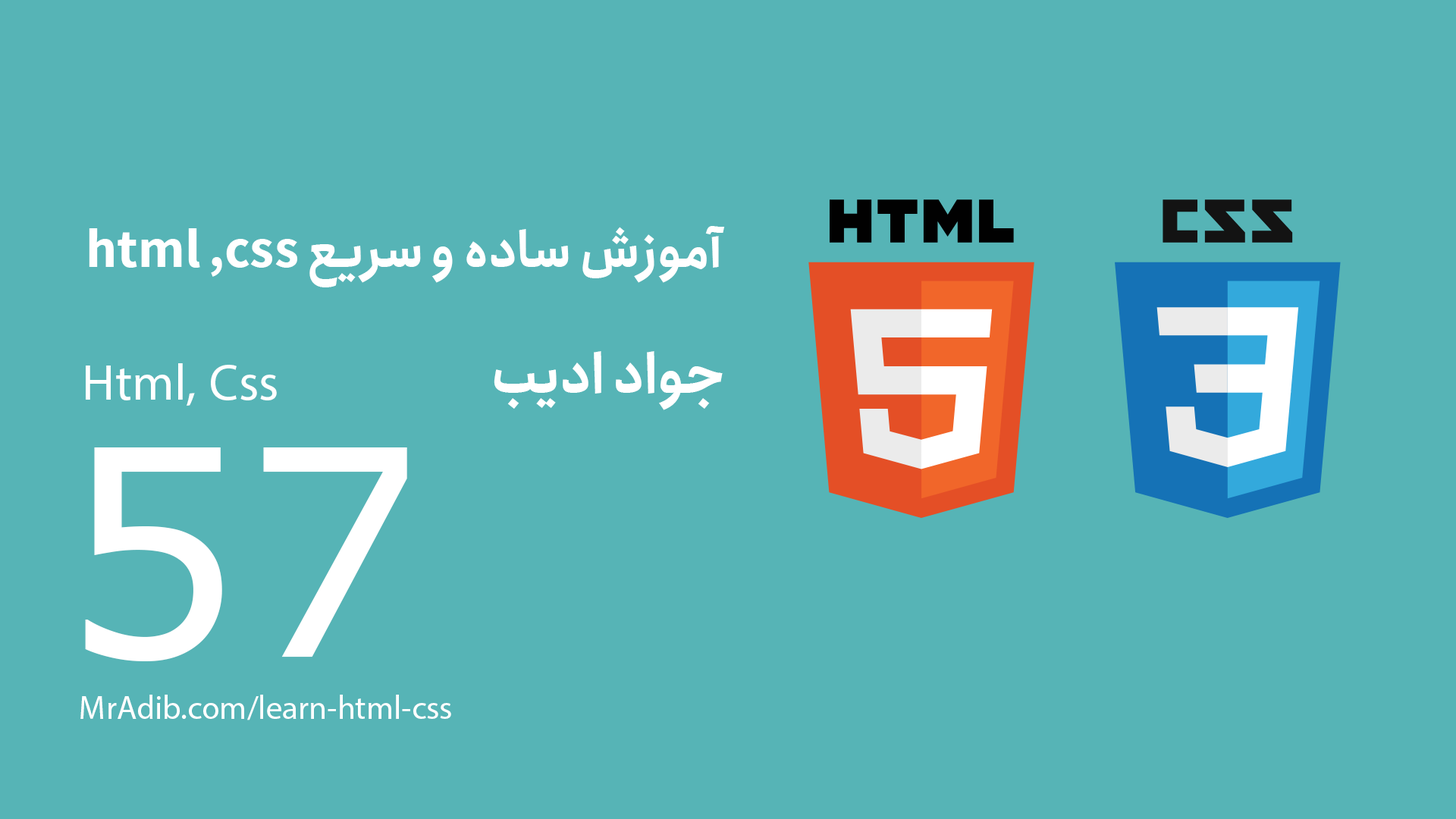
<style>
.page{position:relative;width:1456px;height:819px;background:#56b4b6}
.page>*{position:absolute;margin:0}
.t1{font:49.7px "Anjoman-Bold";color:#ffffff}
.t2{font:54.6px "Anjoman-Bold";color:#ffffff}
.t3{font:70.7px "MyriadArabic-Regular";color:#ffffff}
.t4{font:288.2px "Verdana";color:#ffffff}
.t5{font:45.9px "MyriadArabic-Regular";color:#ffffff}
</style>
<div class="page">
<p class="t1" style="left:89px;top:226px;width:636px;height:61px">html ,css آموزش ساده و سریع</p>
<p class="t2" style="left:494px;top:351px;width:229px;height:59px">جواد ادیب</p>
<p class="t3" style="left:86px;top:363px;width:191px;height:43px">Html, Css</p>
<p class="t4" style="left:85px;top:447px;width:322px;height:214px">57</p>
<p class="t5" style="left:80px;top:695px;width:371px;height:25px">MrAdib.com/learn-html-css</p>
</div>
